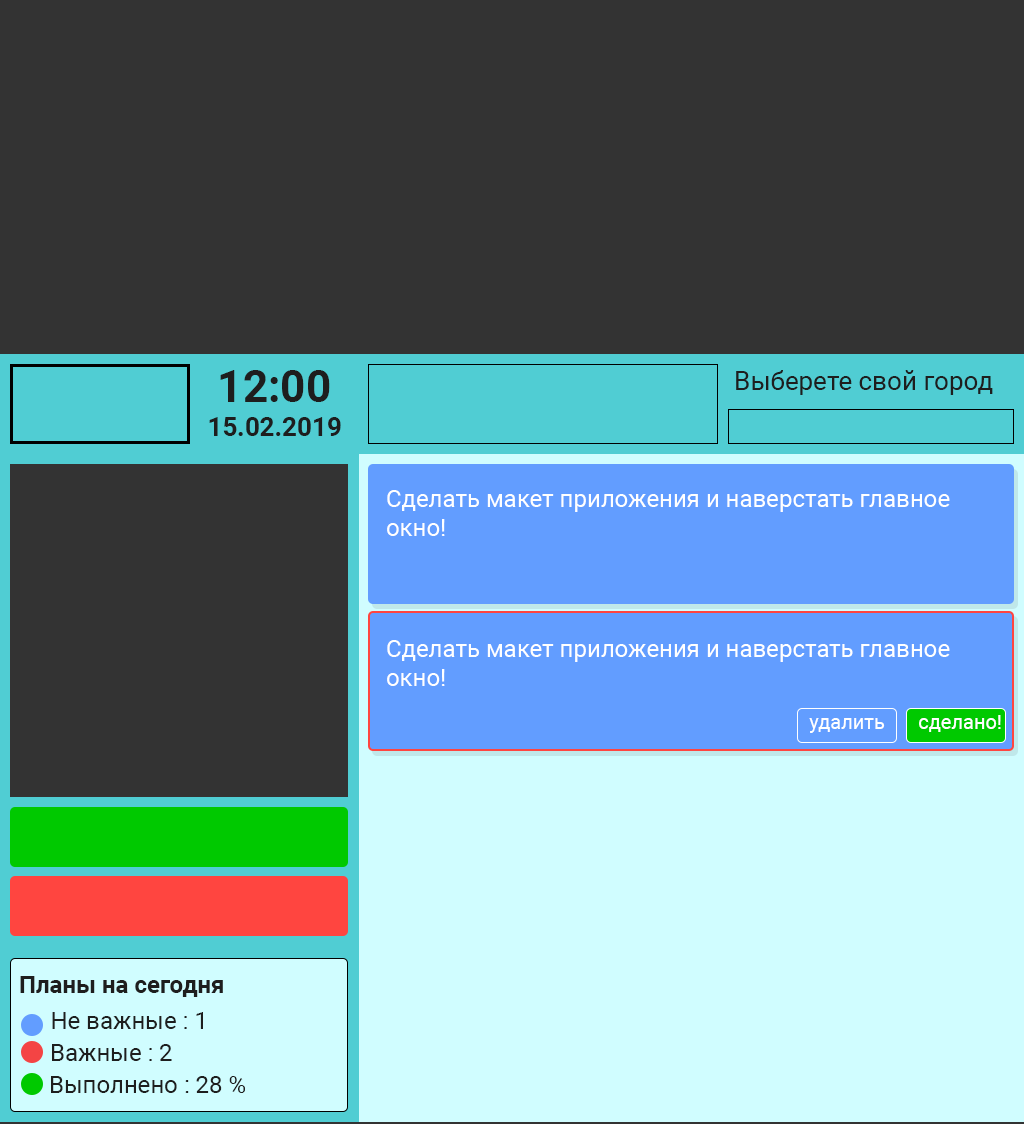
<style>
.page{position:relative;width:1024px;height:1124px;background:#333333}
.page>*{position:absolute;margin:0}
.t1{font:44px "Roboto-Bold";color:#1e1e1e}
.t2{font:26px "Roboto-Regular";color:#1e1e1e}
.t3{font:26px "Roboto-Bold";color:#1e1e1e}
.t4{font:24px "Roboto-Regular";color:#ffffff}
.t5{font:20px "Roboto-Regular";color:#ffffff}
.t6{font:24px "Roboto-Bold";color:#1e1e1e}
.t7{font:24px "Roboto-Regular";color:#1e1e1e}
</style>
<div class="page">
<p class="t1" style="left:220px;top:370px;width:110px;height:32px">12:00</p>
<p class="t2" style="left:736px;top:370px;width:257px;height:25px">Выберете свой город</p>
<p class="t3" style="left:209px;top:417px;width:132px;height:19px">15.02.2019</p>
<p class="t4" style="left:387px;top:490px;width:563px;height:46px">Сделать макет приложения и наверстать главное окно!</p>
<p class="t4" style="left:387px;top:640px;width:563px;height:46px">Сделать макет приложения и наверстать главное окно!</p>
<p class="t5" style="left:809px;top:718px;width:76px;height:15px">удалить</p>
<p class="t5" style="left:919px;top:715px;width:82px;height:17px">сделано!</p>
<p class="t6" style="left:20px;top:976px;width:203px;height:21px">Планы на сегодня</p>
<p class="t7" style="left:52px;top:1012px;width:151px;height:17px">Не важные : 1</p>
<p class="t7" style="left:52px;top:1044px;width:120px;height:17px">Важные : 2</p>
<p class="t7" style="left:51px;top:1076px;width:194px;height:17px">Выполнено : 28 %</p>
</div>
